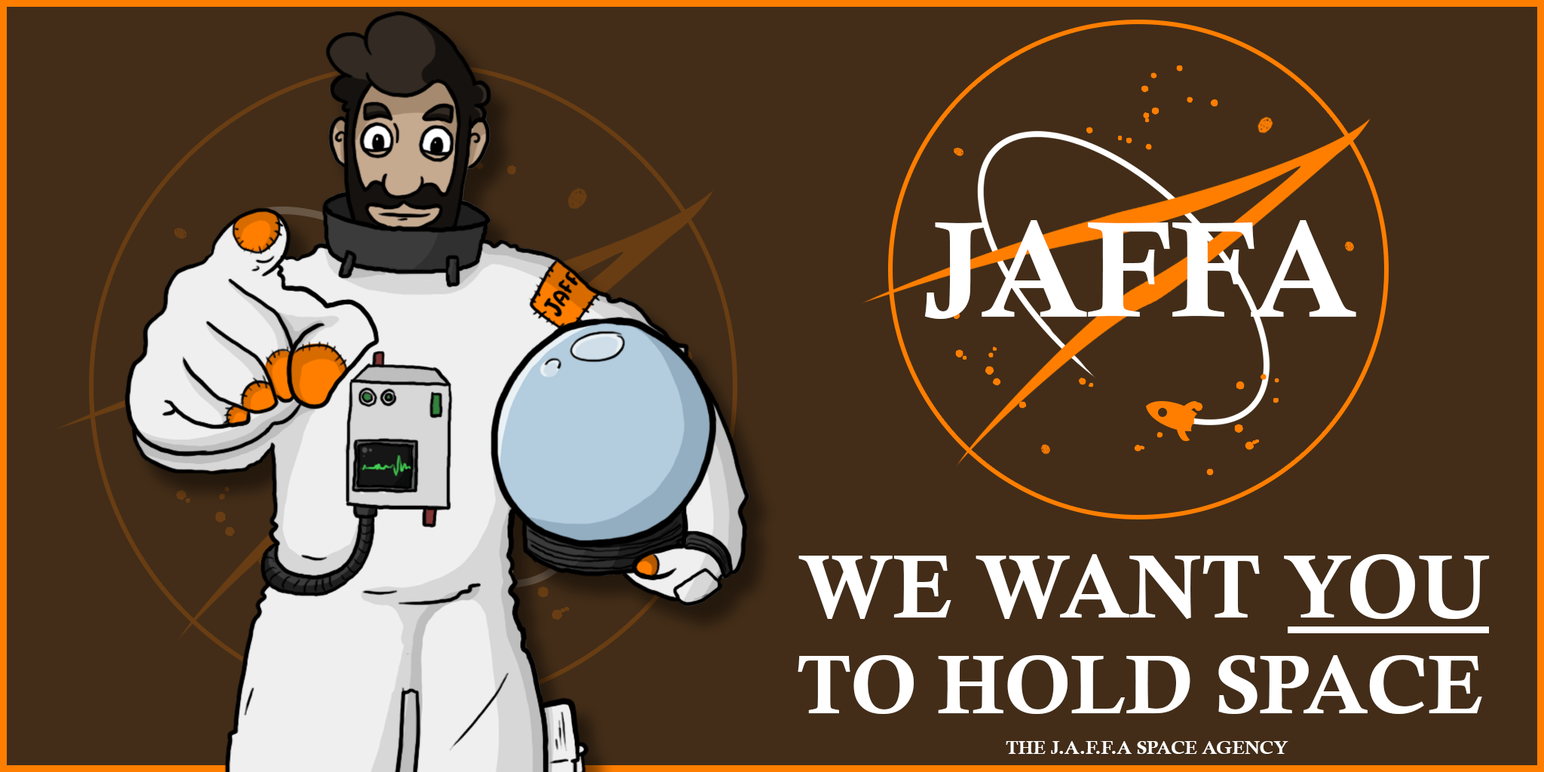
<style>
.page{position:relative;width:1544px;height:772px;background:#432d18}
.page>*{position:absolute;margin:0}
.t1{font:135.1px "CalisMTBol";color:#ffffff;text-transform:uppercase}
.t2{font:89.3px "CalisMTBol";color:#ffffff;text-transform:uppercase}
.t3{font:82.4px "CalisMTBol";color:#ffffff;text-transform:uppercase}
.t4{font:19px "CalisMTBol";color:#ffffff;text-transform:uppercase}
</style>
<div class="page">
<p class="t1" style="left:924px;top:220px;width:433px;height:99px">JAFFA</p>
<p class="t2" style="left:799px;top:554px;width:691px;height:65px">We want you</p>
<p class="t3" style="left:798px;top:655px;width:684px;height:59px">to hold space</p>
<p class="t4" style="left:1006px;top:741px;width:283px;height:13px">The J.A.F.F.A space agency</p>
</div>
